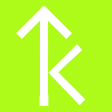
<style>
.page{position:relative;width:112px;height:112px;background:#aefa19}
.page>*{position:absolute;margin:0}
.t1{font:87.5px "LithosPro-Regular";letter-spacing:0.013em;color:#ffffff}
</style>
<div class="page">
<p class="t1" style="left:39px;top:42px;width:47px;height:64px">K</p>
</div>
